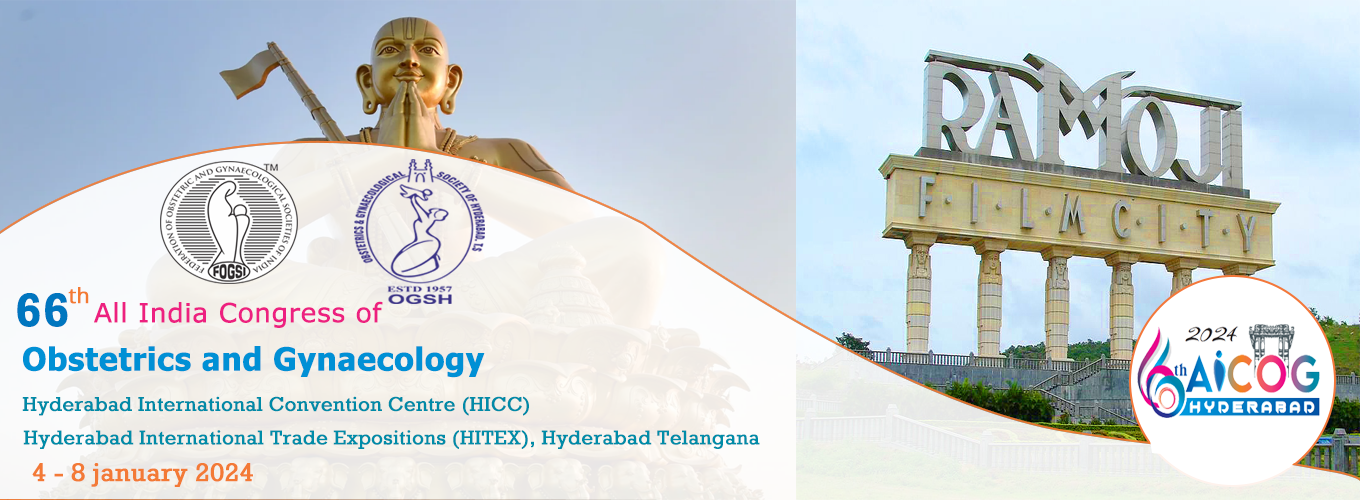
<style>
.page{position:relative;width:1360px;height:500px}
.page>*{position:absolute;margin:0}
.t1{font:48px "Rockwell-Bold";color:#0076bf;font-weight:bold}
.t2{font:36px "OpenSans-Regular";color:#f37a32;font-weight:bold}
.t3{font:45px "Verdana";color:#ed2080;font-weight:bold}
.t4{font:54px "Tahoma-Bold";color:#0090d5;font-weight:bold}
.t5{font:32px "RockwellNova";color:#008aa7;font-weight:bold}
.t6{font:32px "RockwellNova";color:#008ca8;font-weight:bold}
.t7{font:24px "RockwellNova";color:#f37936;font-weight:bold}
</style>
<div class="page">
<p class="t1" style="left:17px;top:293px;width:51px;height:34px">66</p>
<p class="t2" style="left:68px;top:287px;width:21px;height:17px">th</p>
<p class="t3" style="left:94px;top:301px;width:289px;height:27px">All India Congress of</p>
<p class="t4" style="left:23px;top:346px;width:462px;height:32px">Obstetrics and Gynaecology</p>
<p class="t5" style="left:22px;top:396px;width:507px;height:20px">Hyderabad International Convention Centre (HICC)</p>
<p class="t6" style="left:23px;top:430px;width:737px;height:19px">Hyderabad International Trade Expositions (HITEX), Hyderabad Telangana</p>
<p class="t7" style="left:32px;top:463px;width:221px;height:24px">4 - 8 january 2024</p>
</div>
